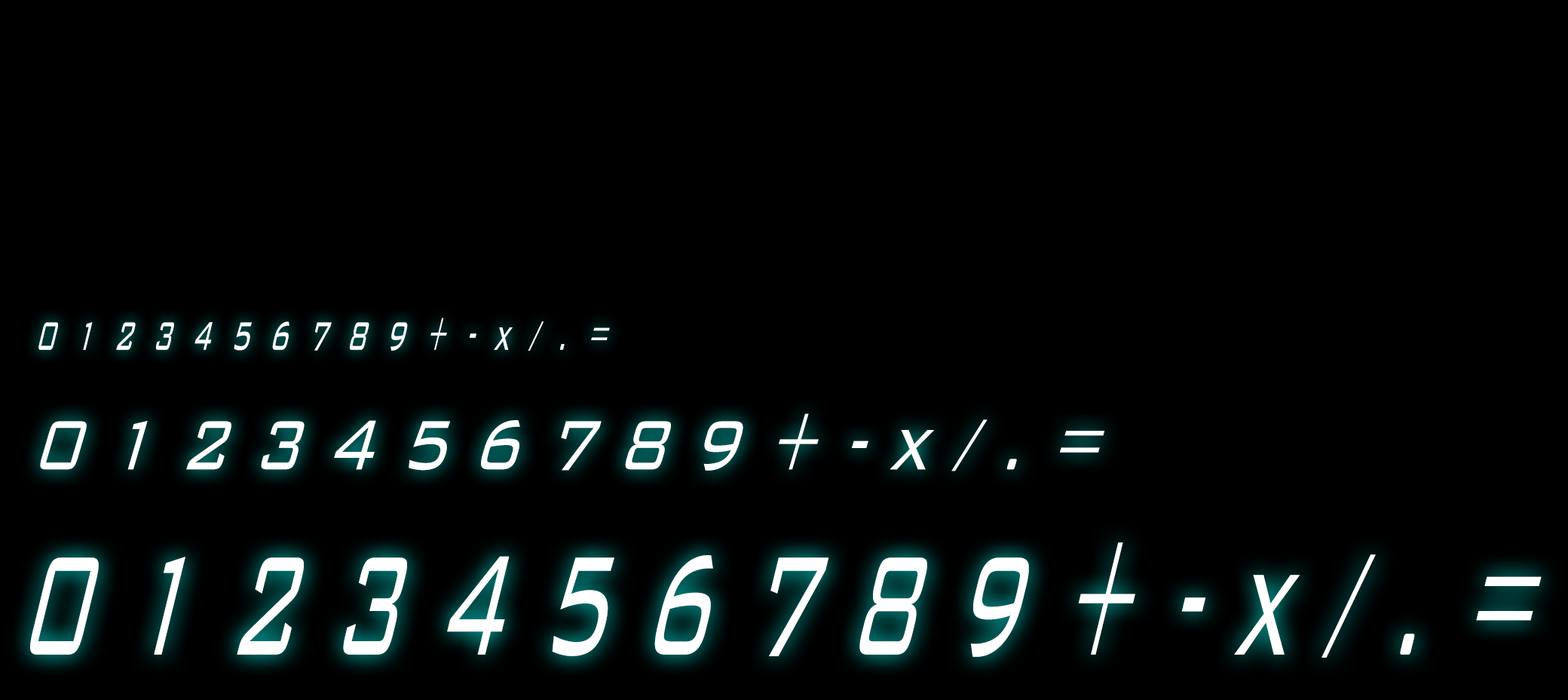
<style>
.page{position:relative;width:1568px;height:700px;background:#000000}
.page>*{position:absolute;margin:0}
.t1{font:54.3px "BankGothicBT-Light";color:#ffffff;scale:0.48 1}
.t2{font:96.5px "BankGothicBT-Light";color:#ffffff;scale:0.68 1}
.t3{font:193px "BankGothicBT-Light";color:#ffffff;scale:0.48 1}
</style>
<div class="page">
<p class="t1" style="left:38px;top:317px;width:572px;height:34px">0  1  2  3  4  5  6  7  8  9  +  -  x  /  .  =</p>
<p class="t2" style="left:40px;top:413px;width:1064px;height:58px">0 1 2 3 4 5 6 7 8 9 + - x / . =</p>
<p class="t3" style="left:30px;top:542px;width:1512px;height:115px">0 1 2 3 4 5 6 7 8 9 + - x / . =</p>
</div>
